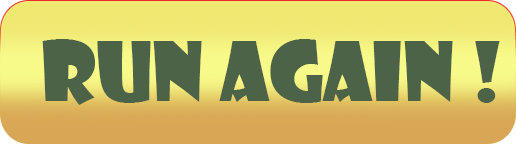
<style>
.page{position:relative;width:516px;height:144px;background:#4d6348}
.page>*{position:absolute;margin:0}
.t1{font:80px "ShowcardGothic-Reg";color:#4d6348}
</style>
<div class="page">
<p class="t1" style="left:42px;top:39px;width:458px;height:66px">run again !</p>
</div>
